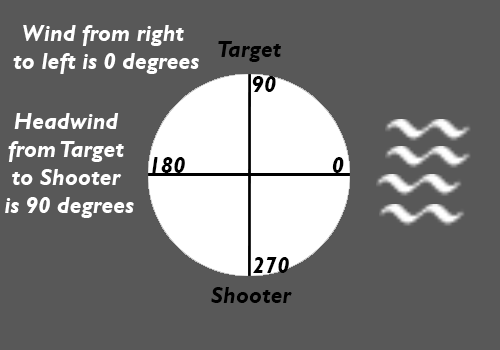
<style>
.page{position:relative;width:500px;height:350px;background:#585858}
.page>*{position:absolute;margin:0}
.t1{font:23.3px "GillSansMT-BoldItalic";color:#ffffff}
.t2{font:23.3px "GillSansMT-BoldItalic";color:#010101}
.t3{font:23.3px "GillSansMT-BoldItalic";color:#000000}
</style>
<div class="page">
<p class="t1" style="left:13px;top:25px;width:186px;height:49px;text-align:center">Wind from right<br> to left is 0 degrees</p>
<p class="t2" style="left:218px;top:41px;width:63px;height:21px">Target</p>
<p class="t3" style="left:252px;top:76px;width:24px;height:16px">90</p>
<p class="t1" style="left:5px;top:113px;width:129px;height:105px;text-align:center">Headwind<br> from Target <br>to Shooter<br> is 90 degrees</p>
<p class="t3" style="left:152px;top:157px;width:33px;height:16px">180</p>
<p class="t3" style="left:332px;top:157px;width:12px;height:16px">0</p>
<p class="t3" style="left:253px;top:257px;width:36px;height:16px">270</p>
<p class="t3" style="left:211px;top:287px;width:81px;height:16px">Shooter</p>
</div>
